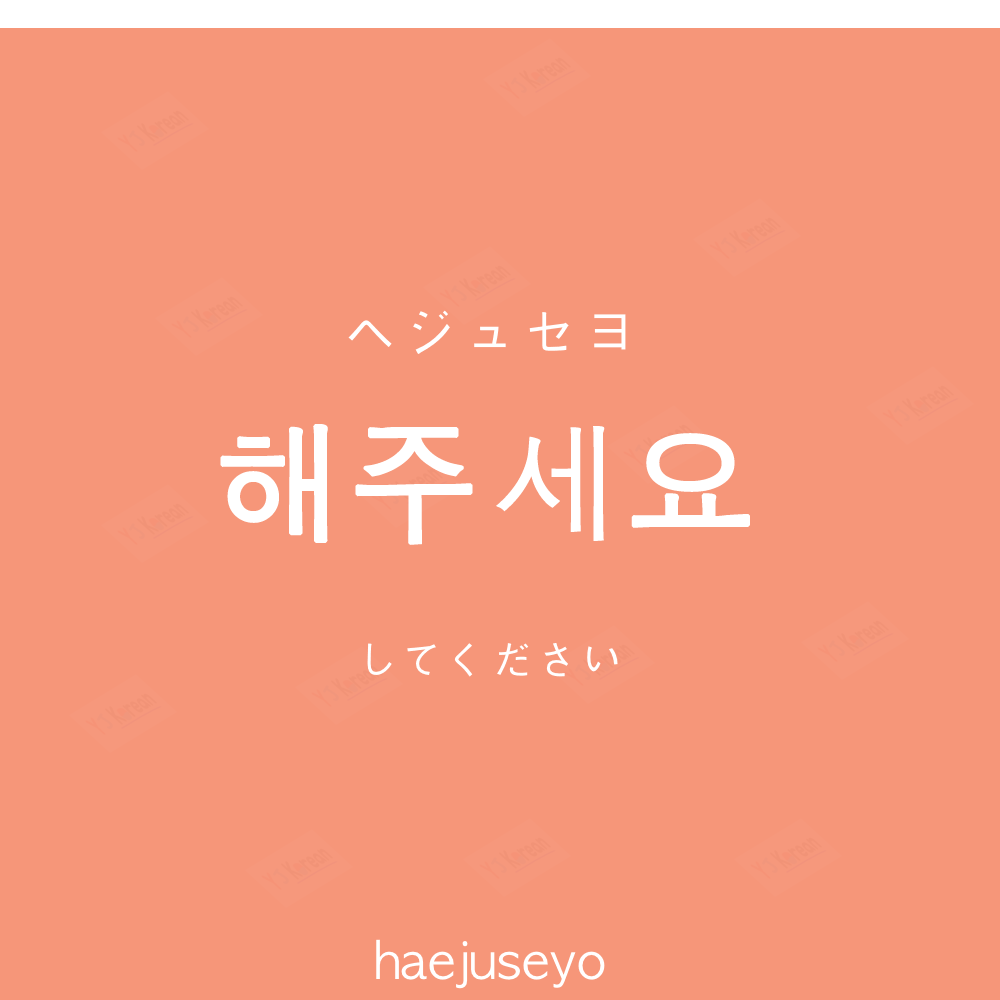
<style>
.page{position:relative;width:1000px;height:1000px;background:#f69679}
.page>*{position:absolute;margin:0}
.t1{font:60px "AppleGothic";color:#ffffff}
.t2{font:130px "AppleGothic";letter-spacing:0.04em;color:#ffffff;font-weight:bold}
.t3{font:45px "AppleGothic";color:#ffffff}
.t4{font:50px "AppleGothic";color:#ffffff}
</style>
<div class="page">
<p class="t1" style="left:348px;top:310px;width:278px;height:44px">ヘジュセヨ</p>
<p class="t2" style="left:220px;top:424px;width:530px;height:121px">해주세요</p>
<p class="t3" style="left:367px;top:643px;width:251px;height:34px">してください</p>
<p class="t4" style="left:376px;top:939px;width:229px;height:50px">haejuseyo</p>
</div>
